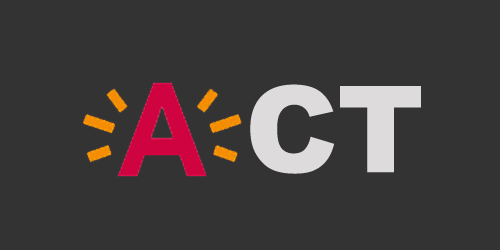
<style>
.page{position:relative;width:500px;height:250px;background:#333333}
.page>*{position:absolute;margin:0}
.t1{font:120px "Arial-Black";letter-spacing:-0.005em;color:#dedbdc}
</style>
<div class="page">
<p class="t1" style="left:250px;top:84px;width:171px;height:90px">CT</p>
</div>
